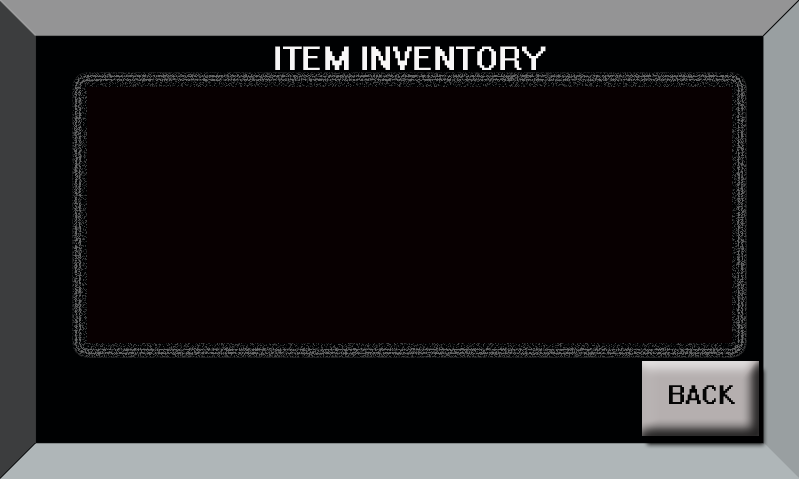
<style>
.page{position:relative;width:800px;height:480px;background:#080001}
.page>*{position:absolute;margin:0}
.t1{font:30px "System";color:#f8f7f7}
.t2{font:24px "System";color:#050505}
</style>
<div class="page">
<p class="t1" style="left:275px;top:46px;width:271px;height:24px">ITEM INVENTORY</p>
<p class="t2" style="left:669px;top:385px;width:66px;height:19px">BACK</p>
</div>
